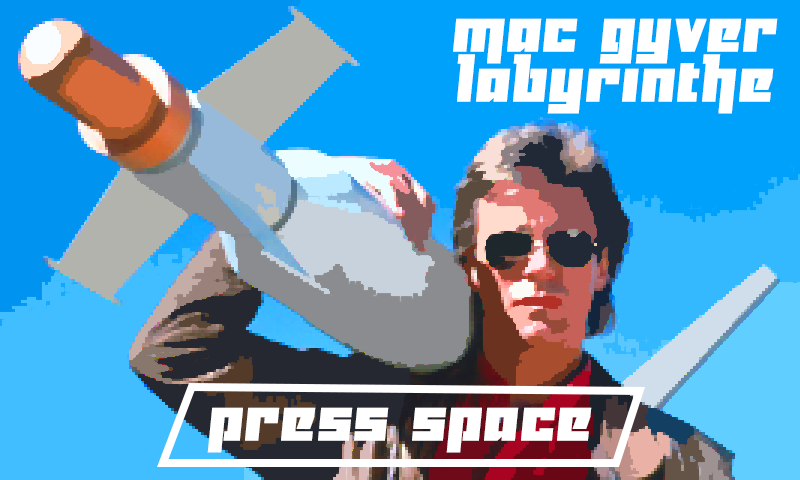
<style>
.page{position:relative;width:800px;height:480px}
.page>*{position:absolute;margin:0}
.t1{font:60px/30px "Yukarimobile";letter-spacing:0.04em;color:#ffffff;font-weight:bold}
.t2{font:60px "Yukarimobile";letter-spacing:0.04em;color:#ffffff;font-weight:bold}
</style>
<div class="page">
<p class="t1" style="left:453px;top:18px;width:325px;height:96px;text-align:center">Mac gyver<br>labyrinthe</p>
<p class="t2" style="left:207px;top:407px;width:385px;height:46px">PRESS space</p>
</div>
